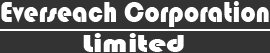
<style>
.page{position:relative;width:270px;height:53px;background:#333333}
.page>*{position:absolute;margin:0}
.t1{font:30.5px "Bauhaus93";color:#ffffff;scale:0.89 1}
.t2{font:25.8px "Bauhaus93";color:#ffffff;scale:1.26 1}
</style>
<div class="page">
<p class="t1" style="left:1px;top:1px;width:268px;height:26px">Everseach Corporation</p>
<p class="t2" style="left:83px;top:33px;width:101px;height:19px">Limited</p>
</div>
